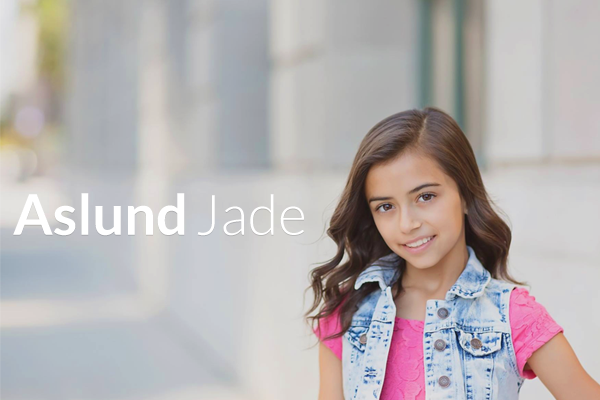
<style>
.page{position:relative;width:600px;height:400px}
.page>*{position:absolute;margin:0}
.t1{font:55.9px "Lato-Bold";color:#ffffff}
.t2{font:55.9px "Lato-Light";color:#ffffff}
</style>
<div class="page">
<p class="t1" style="left:13px;top:193px;width:172px;height:43px">Aslund</p>
<p class="t2" style="left:197px;top:194px;width:107px;height:42px">Jade</p>
</div>
